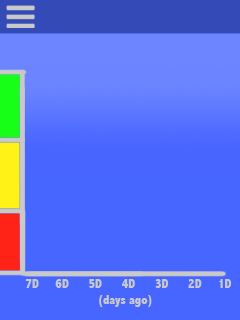
<style>
.page{position:relative;width:240px;height:320px;background:#4765ff}
.page>*{position:absolute;margin:0}
.t1{font:12.9px "AbadiMT-CondensedExtraBold";color:#c9c9c9}
</style>
<div class="page">
<p class="t1" style="left:25px;top:279px;width:207px;height:28px;text-align:justify">7D     6D      5D      4D      3D      2D     1D<br>  (days ago)</p>
</div>
